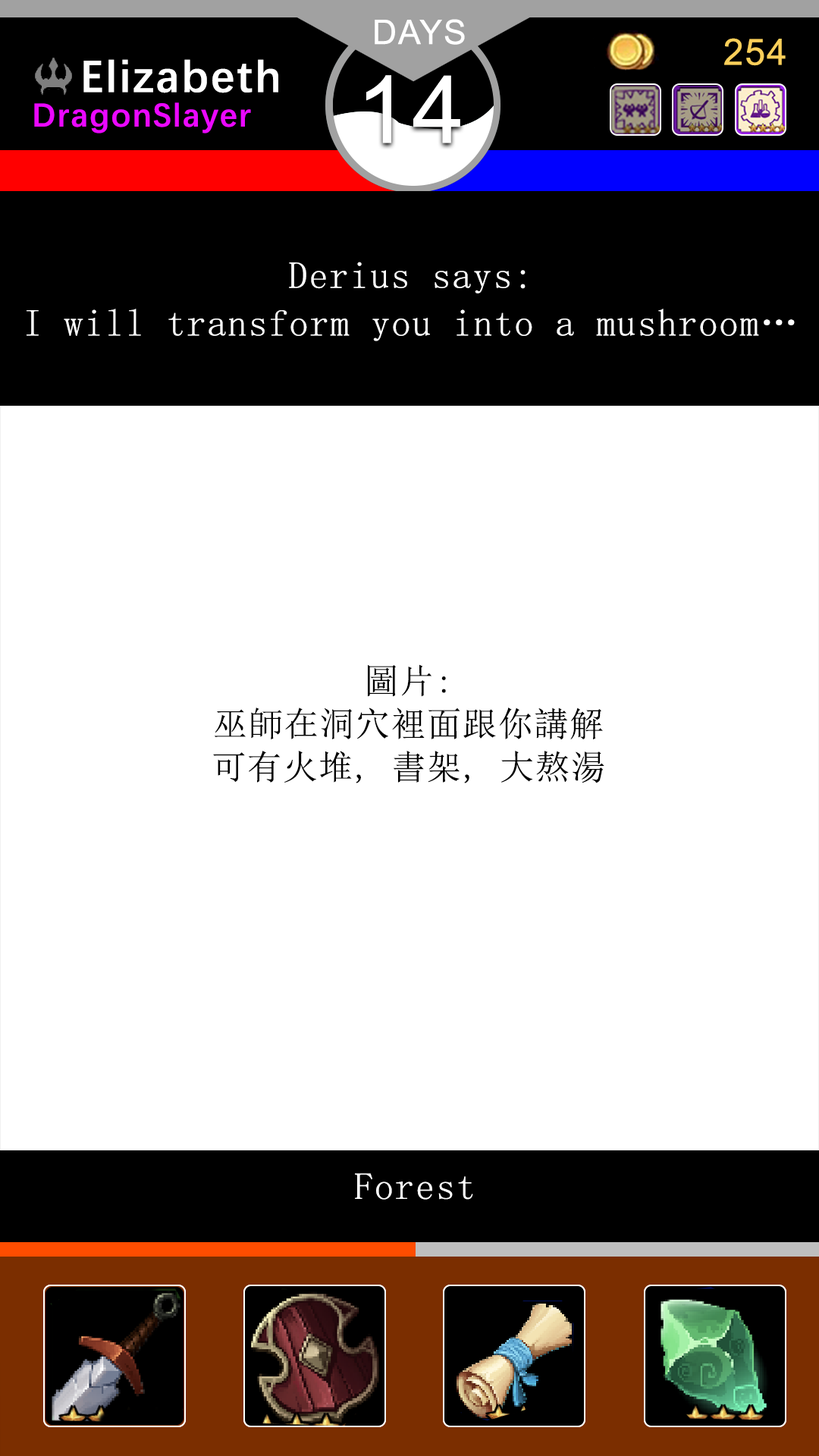
<style>
.page{position:relative;width:819px;height:1456px;background:#ffffff}
.page>*{position:absolute;margin:0}
.t1{font:37.9px/47.6px "SimSun";letter-spacing:0.04em;color:#ffffff}
.t2{font:34.3px/43.1px "SimSun";letter-spacing:0.04em;color:#000000}
.t3{font:37.9px "SimSun";letter-spacing:0.04em;color:#ffffff}
</style>
<div class="page">
<p class="t1" style="left:27px;top:262px;width:768px;height:79px;text-align:center">Derius says: <br>I will transform you into a mushroom…</p>
<p class="t2" style="left:213px;top:664px;width:391px;height:119px;text-align:center">圖片:<br>巫師在洞穴裡面跟你講解<br>可有火堆, 書架, 大熬湯</p>
<p class="t3" style="left:355px;top:1173px;width:118px;height:27px">Forest</p>
</div>
